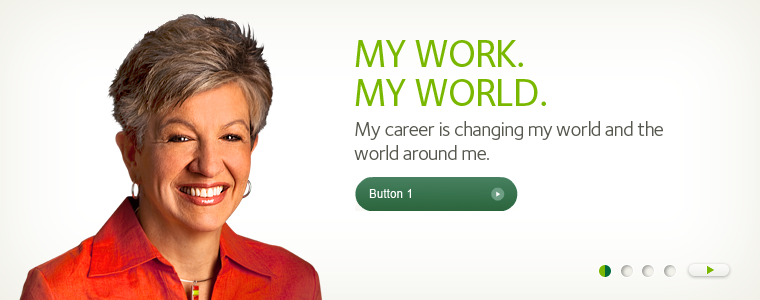
<style>
.page{position:relative;width:760px;height:300px;background:#ffffff}
.page>*{position:absolute;margin:0}
.t1{font:39px/39px "FoundrySterling-Medium";letter-spacing:-0.03em;color:#7ab800;text-transform:uppercase}
.t2{font:20px/24px "FoundrySterling-Book";letter-spacing:-0.025em;color:#57584f}
.t3{font:12px "ArialMT";letter-spacing:0.04em;color:#ffffff;scale:0.91 1}
</style>
<div class="page">
<p class="t1" style="left:355px;top:40px;width:191px;height:66px">My Work.<br>My World.</p>
<p class="t2" style="left:354px;top:121px;width:309px;height:39px">My career is changing my world and the<br>world around me.</p>
<p class="t3" style="left:369px;top:189px;width:42px;height:9px">Button 1</p>
</div>
